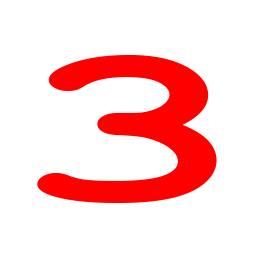
<style>
.page{position:relative;width:256px;height:256px;background:#ffffff}
.page>*{position:absolute;margin:0}
.t1{font:222.5px "CourierNewPS-BoldMT";color:#ff0000;scale:1.73 1}
</style>
<div class="page">
<p class="t1" style="left:37px;top:55px;width:180px;height:148px">3</p>
</div>
